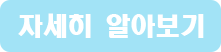
<style>
.page{position:relative;width:221px;height:52px;background:#a2e3f6}
.page>*{position:absolute;margin:0}
.t1{font:25px "HeadlineR-HM";color:#ffffff}
</style>
<div class="page">
<p class="t1" style="left:18px;top:13px;width:186px;height:25px">자세히 알아보기</p>
</div>
